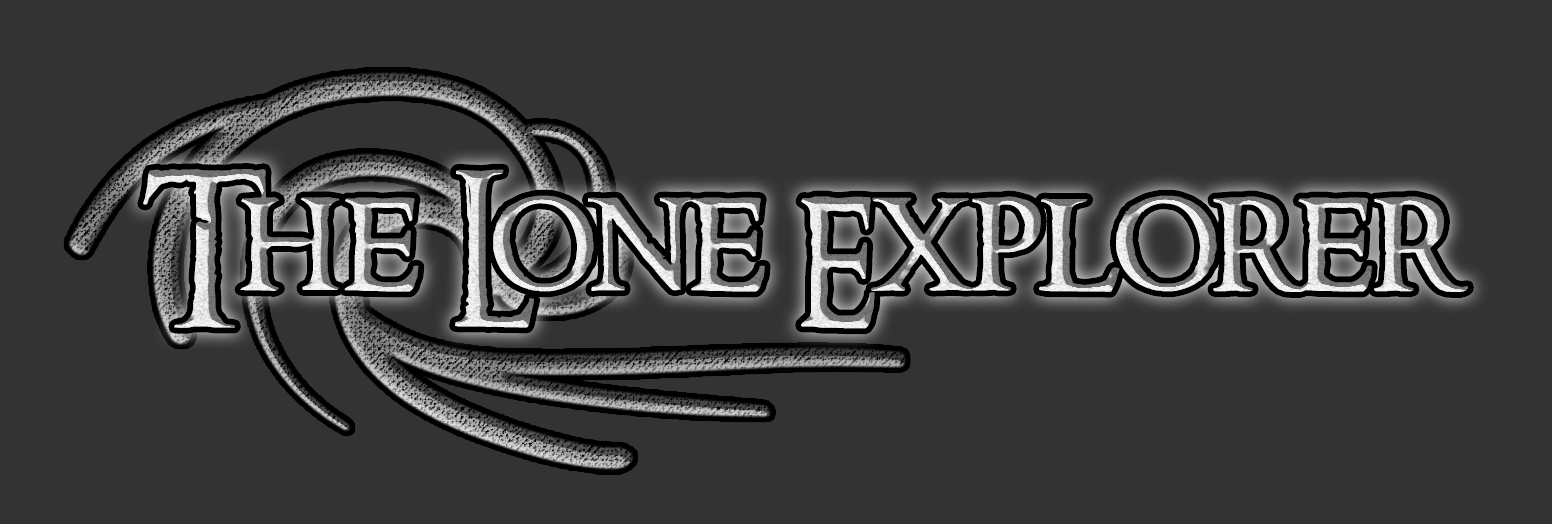
<style>
.page{position:relative;width:1552px;height:524px;background:#333333}
.page>*{position:absolute;margin:0}
.t1{font:150px "RingbearerMedium"}
</style>
<div class="page">
<p class="t1" style="left:143px;top:169px;width:1325px;height:160px">The Lone Explorer</p>
</div>
